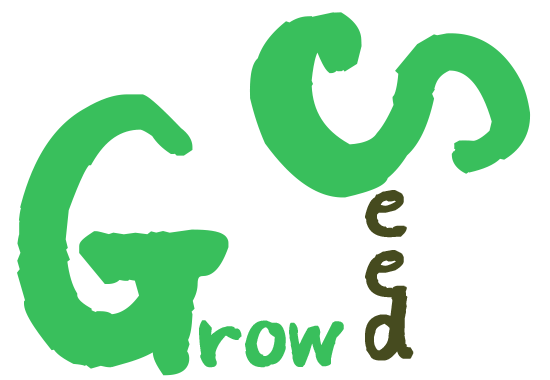
<style>
.page{position:relative;width:550px;height:380px;background:#ffffff}
.page>*{position:absolute;margin:0}
.t1{font:400px "SangSangFlowerRoad";color:#39bf5c;font-weight:bold}
.t2{font:100px/60px "SangSangFlowerRoad";color:#464b1f;font-weight:bold}
.t3{font:100px "SangSangFlowerRoad";color:#39bf5c;font-weight:bold}
</style>
<div class="page">
<p class="t1" style="left:249px;top:12px;width:282px;height:186px;rotate:88deg">S</p>
<p class="t1" style="left:17px;top:94px;width:212px;height:282px">G</p>
<p class="t2" style="left:365px;top:190px;width:49px;height:171px">e<br>e<br>d</p>
<p class="t3" style="left:199px;top:320px;width:145px;height:48px">row</p>
</div>
